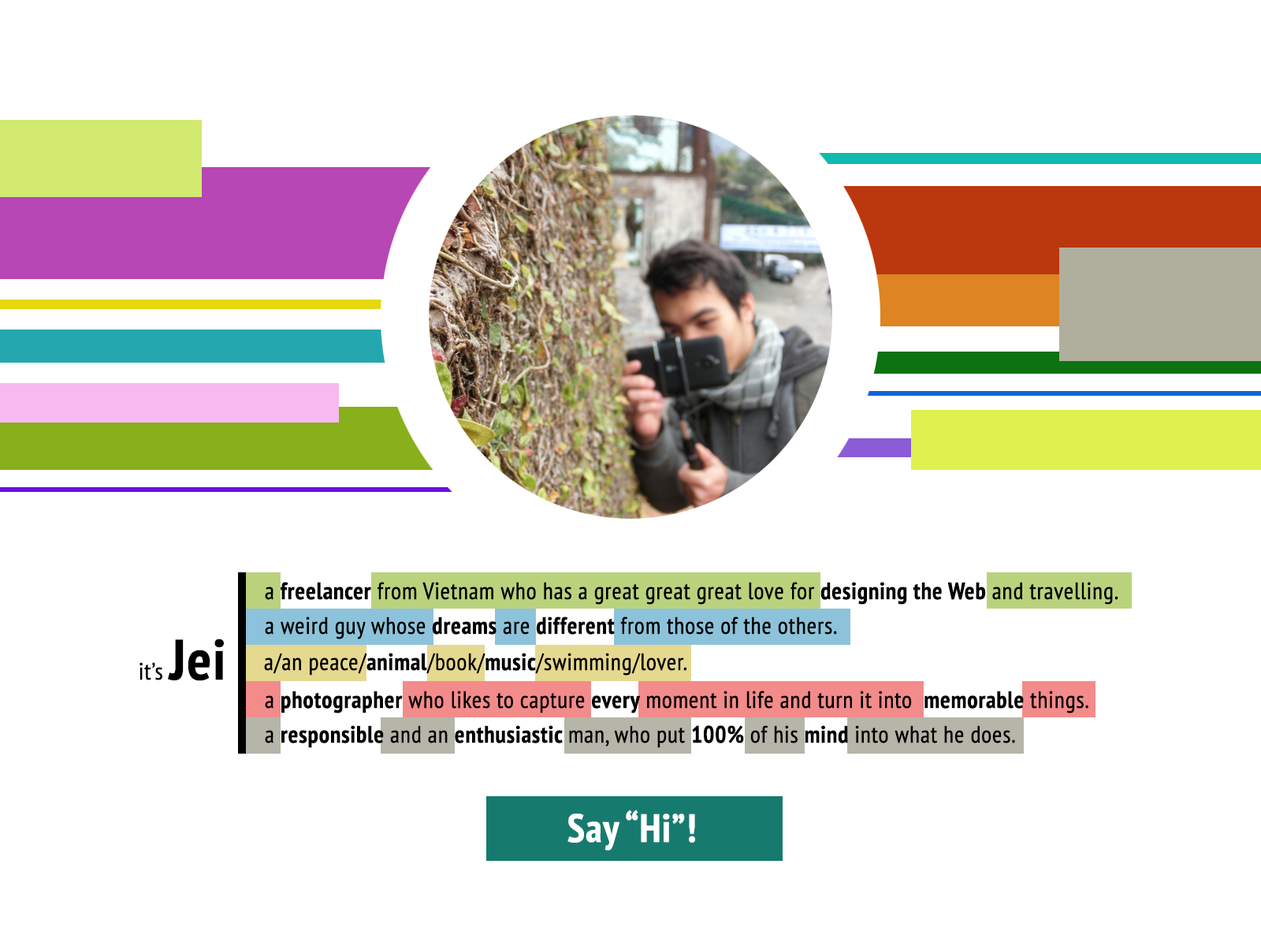
<style>
.page{position:relative;width:1261px;height:946px;background:#ffffff}
.page>*{position:absolute;margin:0}
.t1{font:23.6px "PTSans-Narrow";color:#000000;font-weight:bold}
.t2{font:23.6px "PTSans-NarrowBold";color:#000000;font-weight:bold}
.t3{font:56.7px "PTSans-NarrowBold";color:#000000;font-weight:bold}
.t4{font:39.4px "PTSans-NarrowBold";color:#ffffff;font-weight:bold}
</style>
<div class="page">
<p class="t1" style="left:265px;top:582px;width:853px;height:22px">a <span class="t2">freelancer</span> from Vietnam who has a great great great love for <span class="t2">designing the Web</span> and travelling.</p>
<p class="t1" style="left:265px;top:616px;width:572px;height:23px">a weird guy whose <span class="t2">dreams</span> are <span class="t2">different </span>from those of the others.</p>
<p class="t1" style="left:139px;top:638px;width:85px;height:43px">it’s <span class="t3">Jei</span></p>
<p class="t1" style="left:264px;top:653px;width:422px;height:22px">a/an peace/<span class="t2">animal</span>/book/<span class="t2">music</span>/swimming/lover.</p>
<p class="t1" style="left:265px;top:690px;width:823px;height:23px">a <span class="t2">photographer</span> who likes to capture <span class="t2">every</span> moment in life and turn it into  <span class="t2">memorable</span> things.</p>
<p class="t1" style="left:265px;top:725px;width:750px;height:23px">a <span class="t2">responsible</span> and an <span class="t2">enthusiastic </span>man, who put <span class="t2">100%</span> of his <span class="t2">mind</span> into what he does.</p>
<p class="t4" style="left:567px;top:809px;width:128px;height:41px">Say “Hi”!</p>
</div>
